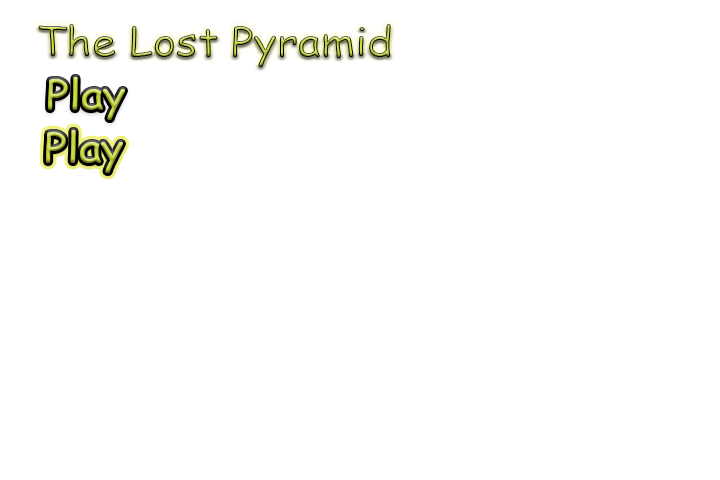
<style>
.page{position:relative;width:720px;height:480px;background:#ffffff}
.page>*{position:absolute;margin:0}
.t1{font:40px "ComicSansMS";scale:1.1 1}
</style>
<div class="page">
<p class="t1" style="left:38px;top:24px;width:353px;height:43px">The Lost Pyramid</p>
<p class="t1" style="left:48px;top:77px;width:77px;height:43px">Play</p>
</div>
